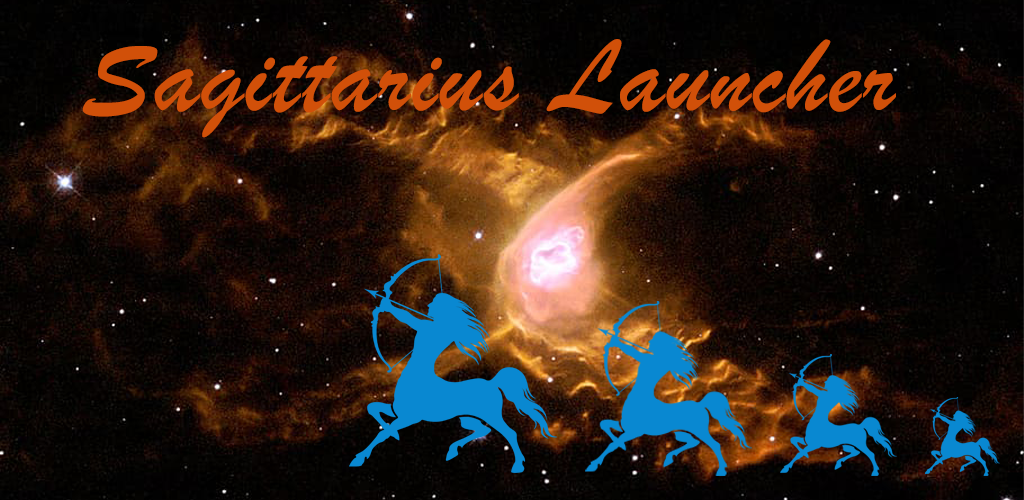
<style>
.page{position:relative;width:1024px;height:500px}
.page>*{position:absolute;margin:0}
.t1{font:109.3px "BrushScriptMT";letter-spacing:0.02em;color:#d15009}
</style>
<div class="page">
<p class="t1" style="left:82px;top:39px;width:814px;height:99px">Sagittarius Launcher</p>
</div>
